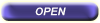
<style>
.page{position:relative;width:100px;height:23px}
.page>*{position:absolute;margin:0}
.t1{font:10.7px "Arial-BoldItalicMT";color:#fcfbf9}
</style>
<div class="page">
<p class="t1" style="left:35px;top:7px;width:31px;height:9px">OPEN</p>
</div>
